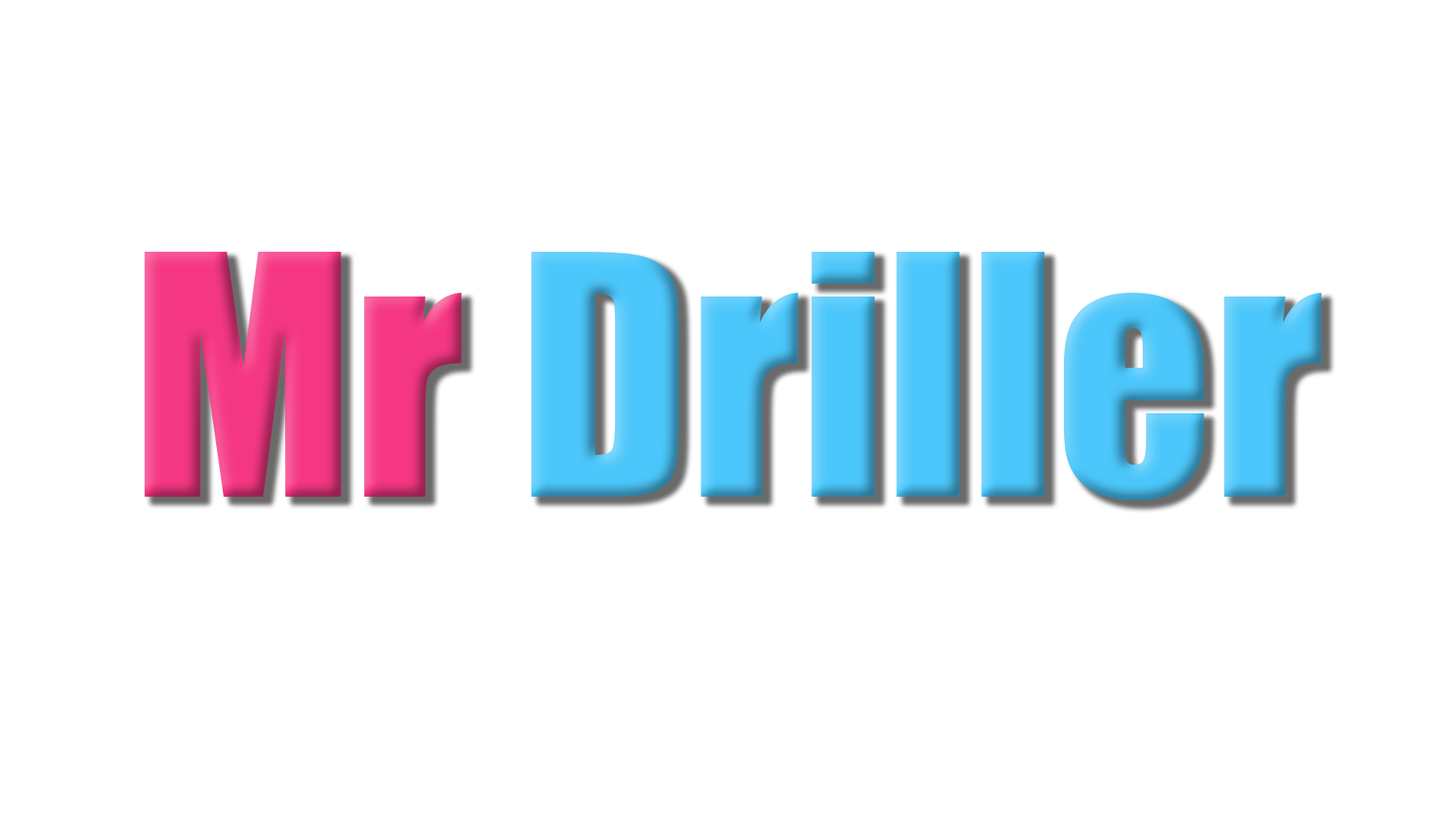
<style>
.page{position:relative;width:1456px;height:819px;background:#ffffff}
.page>*{position:absolute;margin:0}
.t1{font:309.5px "Impact";color:#4cc7fb}
.t2{font:309.5px "Impact";color:#f53783}
</style>
<div class="page">
<p class="t1" style="left:144px;top:252px;width:1178px;height:248px"><span class="t2">Mr </span>Driller</p>
</div>
